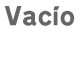
<style>
.page{position:relative;width:80px;height:70px;background:#ffffff}
.page>*{position:absolute;margin:0}
.t1{font:26px "Transport-Heavy-Regular";color:#666666}
</style>
<div class="page">
<p class="t1" style="left:4px;top:6px;width:71px;height:20px">Vacío</p>
</div>
